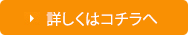
<style>
.page{position:relative;width:188px;height:35px;background:#f99003}
.page>*{position:absolute;margin:0}
.t1{font:15px "KozGoPr6N-Regular";color:#fefefe}
</style>
<div class="page">
<p class="t1" style="left:46px;top:11px;width:112px;height:15px">詳しくはコチラへ</p>
</div>
